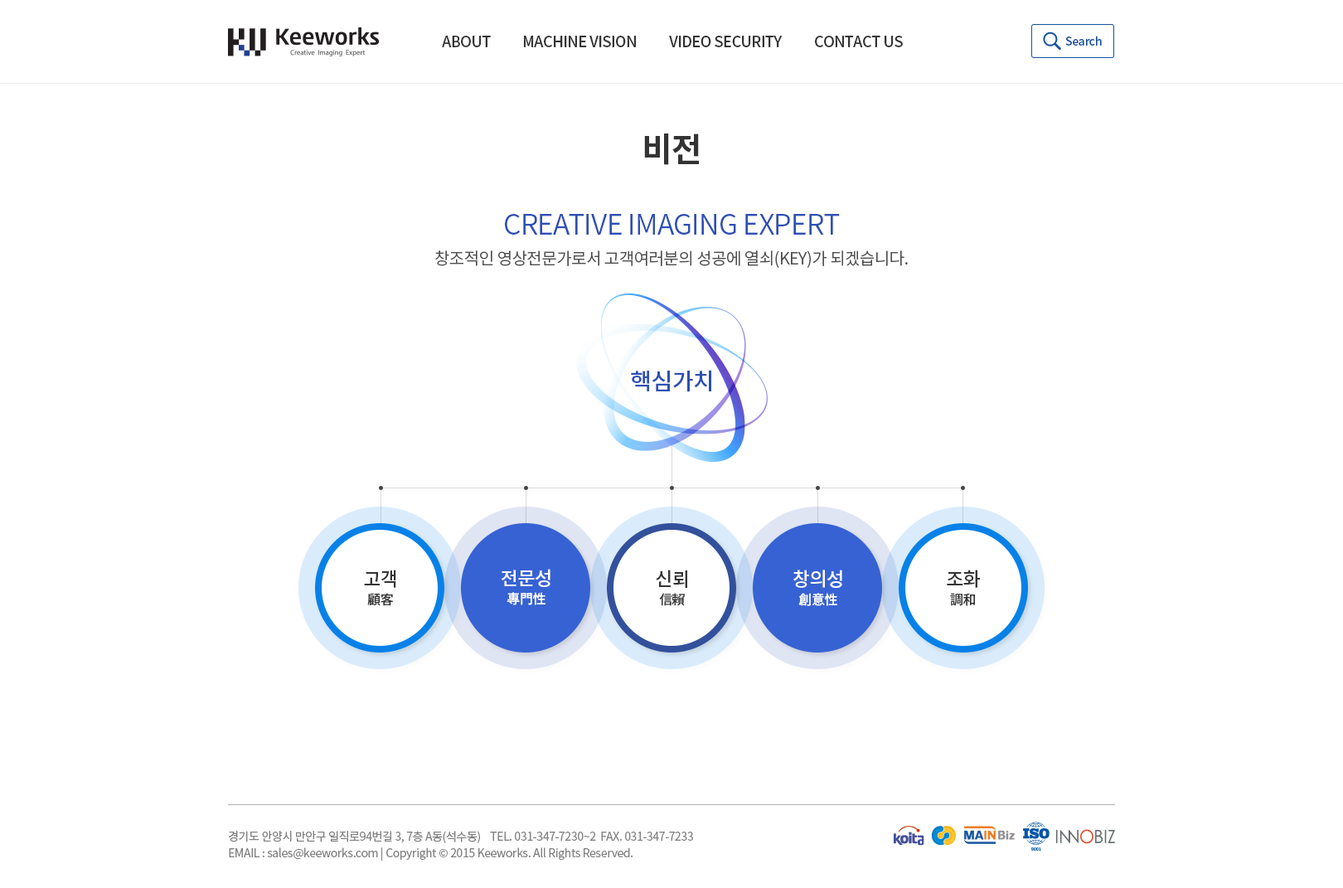
<style>
.page{position:relative;width:1343px;height:888px;background:#ffffff}
.page>*{position:absolute;margin:0}
.t1{font:14.9px "NotoSansCJKkr-Medium";letter-spacing:-0.025em;color:#333333;text-transform:uppercase}
.t2{font:11.6px "NotoSansCJKkr-Medium";letter-spacing:-0.025em;color:#17539e}
.t3{font:33.2px "NotoSansCJKkr-Bold";letter-spacing:-0.025em;color:#333333}
.t4{font:28.2px "NotoSansCJKkr-DemiLight";letter-spacing:-0.025em;color:#2d4fb4;text-transform:uppercase}
.t5{font:16.6px "NotoSansCJKkr-DemiLight";letter-spacing:-0.025em;color:#4d4d4d;text-transform:uppercase}
.t6{font:23.2px "NotoSansCJKkr-Medium";letter-spacing:-0.025em;color:#2d4fb4;text-transform:uppercase}
.t7{font:19.1px/23.2px "NotoSansCJKkr-Medium";letter-spacing:-0.025em;color:#333333;text-transform:uppercase}
.t8{font:13.3px/19.9px "NotoSansCJKkr-Medium";letter-spacing:-0.025em;color:#333333;text-transform:uppercase}
.t9{font:19.1px/23.2px "NotoSansCJKkr-Medium";letter-spacing:-0.025em;color:#ffffff;text-transform:uppercase}
.t10{font:13.3px/19.9px "NotoSansCJKkr-Medium";letter-spacing:-0.025em;color:#ffffff;text-transform:uppercase}
.t11{font:11.6px/16.6px "NotoSansCJKkr-Regular";letter-spacing:-0.025em;color:#808080}
</style>
<div class="page">
<p class="t1" style="left:442px;top:36px;width:49px;height:11px">ABOUT</p>
<p class="t1" style="left:523px;top:36px;width:113px;height:11px">MACHINE VISION</p>
<p class="t1" style="left:669px;top:36px;width:114px;height:11px">VIDEO SECURITY</p>
<p class="t1" style="left:815px;top:36px;width:88px;height:11px">CONTACT US</p>
<p class="t2" style="left:1065px;top:36px;width:37px;height:10px">Search</p>
<p class="t3" style="left:644px;top:133px;width:55px;height:32px">비전</p>
<p class="t4" style="left:505px;top:214px;width:335px;height:21px">Creative Imaging Expert</p>
<p class="t5" style="left:435px;top:250px;width:473px;height:18px">창조적인 영상전문가로서 고객여러분의 성공에 열쇠(Key)가 되겠습니다.</p>
<p class="t6" style="left:631px;top:370px;width:80px;height:22px">핵심가치</p>
<p class="t7" style="left:364px;top:570px;width:32px;height:36px;text-align:center">고객<br><span class="t8">顧客</span></p>
<p class="t9" style="left:502px;top:569px;width:48px;height:36px;text-align:center">전문성<br><span class="t10">專門性</span></p>
<p class="t7" style="left:656px;top:570px;width:31px;height:36px;text-align:center">신뢰<br><span class="t8">信賴</span></p>
<p class="t9" style="left:793px;top:570px;width:49px;height:36px;text-align:center">창의성<br><span class="t10">創意性</span></p>
<p class="t7" style="left:947px;top:570px;width:33px;height:36px;text-align:center">조화<br><span class="t8">調和</span></p>
<p class="t11" style="left:229px;top:831px;width:464px;height:30px">경기도 안양시 만안구 일직로94번길 3, 7층 A동(석수동)    TEL. 031-347-7230~2  FAX. 031-347-7233<br>EMAIL : sales@keeworks.com | Copyright © 2015 Keeworks. All Rights Reserved.</p>
</div>
